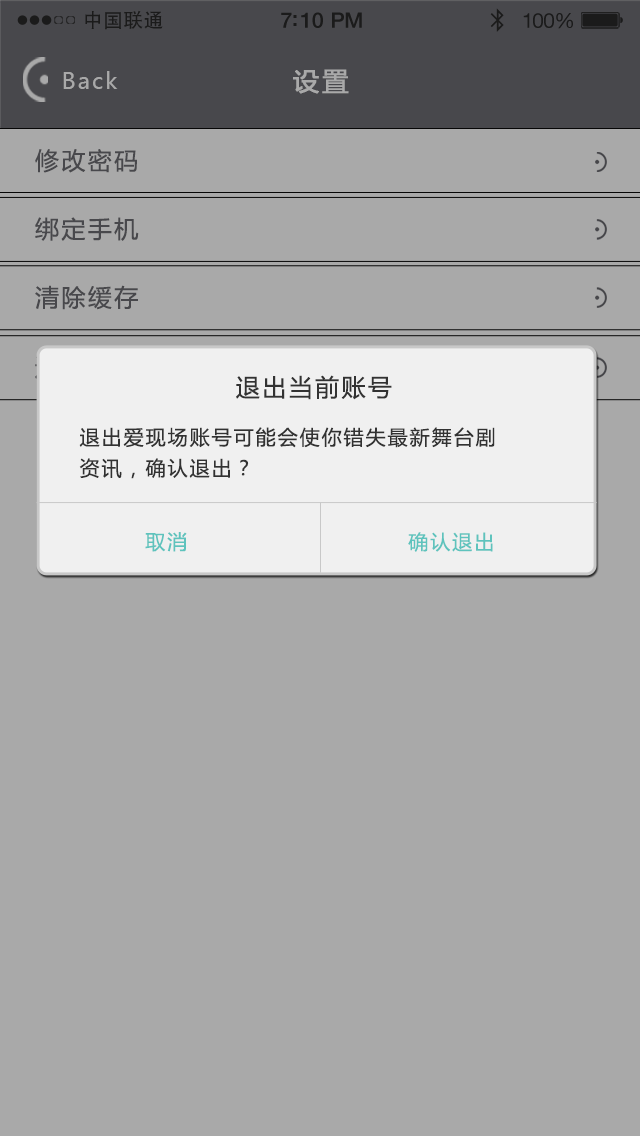
<style>
.page{position:relative;width:640px;height:1136px;background:#a9a9a9}
.page>*{position:absolute;margin:0}
.t1{font:19.7px "AdobeHeitiStd-Regular";letter-spacing:0.02em;color:#1b1b1b}
.t2{font:21.4px "HelveticaNeue-Medium";letter-spacing:-0.02em;color:#1b1b1b}
.t3{font:20.6px "HelveticaNeue";letter-spacing:-0.02em;color:#1b1b1b}
.t4{font:22px "MicrosoftYaHei";letter-spacing:0.1em;color:#a9a9a9}
.t5{font:26px "MicrosoftYaHei";letter-spacing:0.1em;color:#a9a9a9;font-weight:bold}
.t6{font:24px "MicrosoftYaHei";letter-spacing:0.1em;color:#48484c}
.t7{font:24px "MicrosoftYaHei";letter-spacing:0.1em;color:#323232}
.t8{font:20px/30.9px "MicrosoftYaHei";letter-spacing:0.1em;color:#323232}
.t9{font:20px "MicrosoftYaHei";letter-spacing:0.1em;color:#5ec3bd}
</style>
<div class="page">
<p class="t1" style="left:85px;top:10px;width:78px;height:20px">中国联通</p>
<p class="t2" style="left:281px;top:12px;width:81px;height:16px">7:10 PM</p>
<p class="t3" style="left:523px;top:13px;width:50px;height:16px">100%</p>
<p class="t4" style="left:63px;top:71px;width:55px;height:18px">Back</p>
<p class="t5" style="left:293px;top:69px;width:56px;height:25px">设置</p>
<p class="t6" style="left:35px;top:149px;width:102px;height:24px">修改密码</p>
<p class="t6" style="left:35px;top:217px;width:104px;height:24px">绑定手机</p>
<p class="t6" style="left:35px;top:285px;width:103px;height:25px">清除缓存</p>
<p class="t7" style="left:236px;top:375px;width:156px;height:25px">退出当前账号</p>
<p class="t8" style="left:79px;top:427px;width:416px;height:52px">退出爱现场账号可能会使你错失最新舞台剧<br>资讯，确认退出？</p>
<p class="t9" style="left:145px;top:532px;width:42px;height:20px">取消</p>
<p class="t9" style="left:408px;top:532px;width:85px;height:20px">确认退出</p>
</div>
